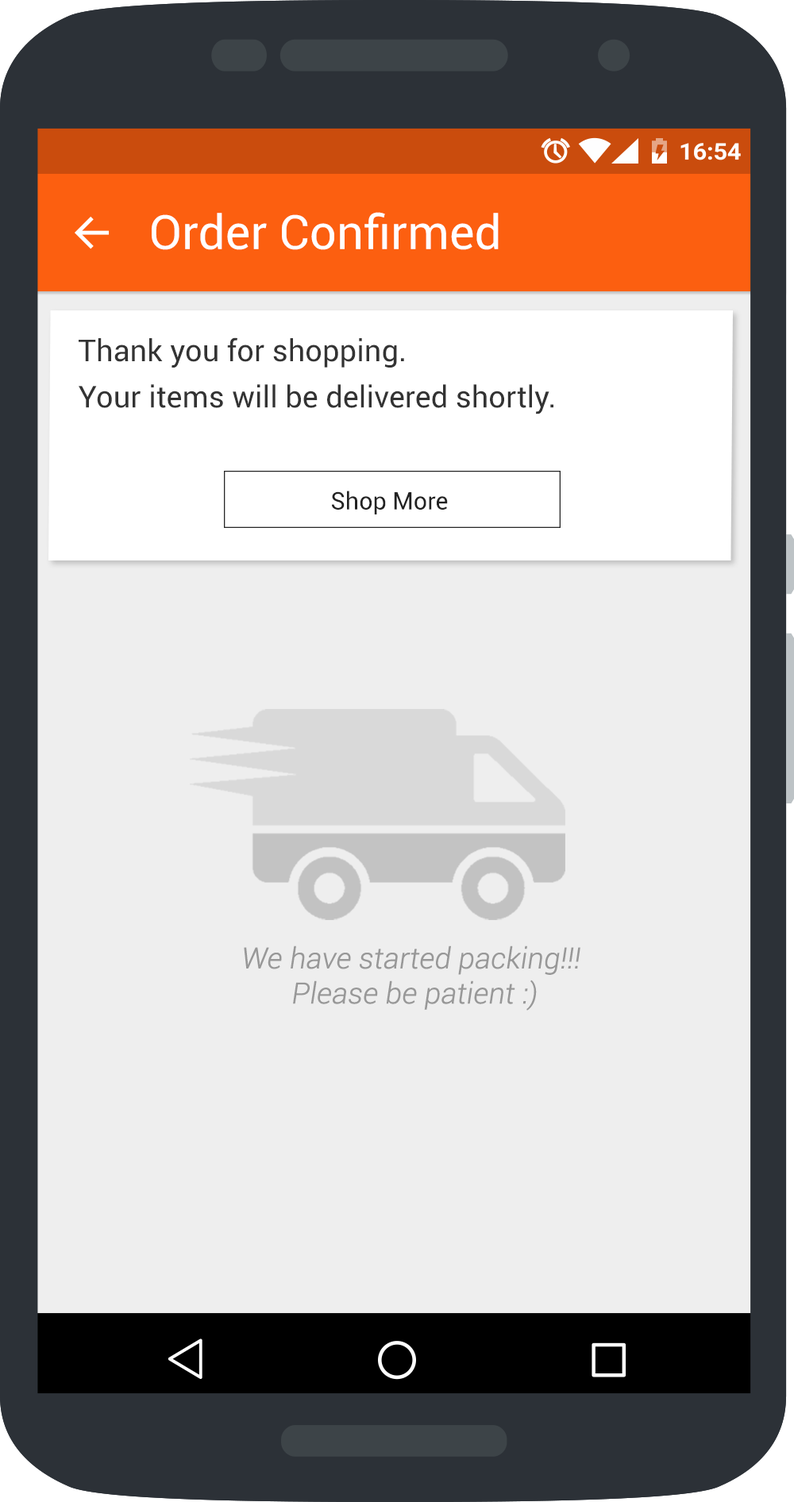
<style>
.page{position:relative;width:794px;height:1502px;background:#eeeeee}
.page>*{position:absolute;margin:0}
.t1{font:47.4px "Roboto-Regular";color:#ffffff}
.t2{font:30.2px/46.3px "Roboto-Regular";color:#333333}
.t3{font:24.2px "Roboto-Regular";color:#222222}
.t4{font:29.2px "Roboto-LightItalic";letter-spacing:-0.02em;color:#989898;font-weight:bold}
</style>
<div class="page">
<p class="t1" style="left:152px;top:212px;width:347px;height:38px">Order Confirmed</p>
<p class="t2" style="left:79px;top:337px;width:474px;height:77px">Thank you for shopping. <br>Your items will be delivered shortly.</p>
<p class="t3" style="left:332px;top:491px;width:116px;height:23px">Shop More</p>
<p class="t4" style="left:244px;top:946px;width:336px;height:65px;text-align:center">We have started packing!!! <br>Please be patient :)</p>
</div>
